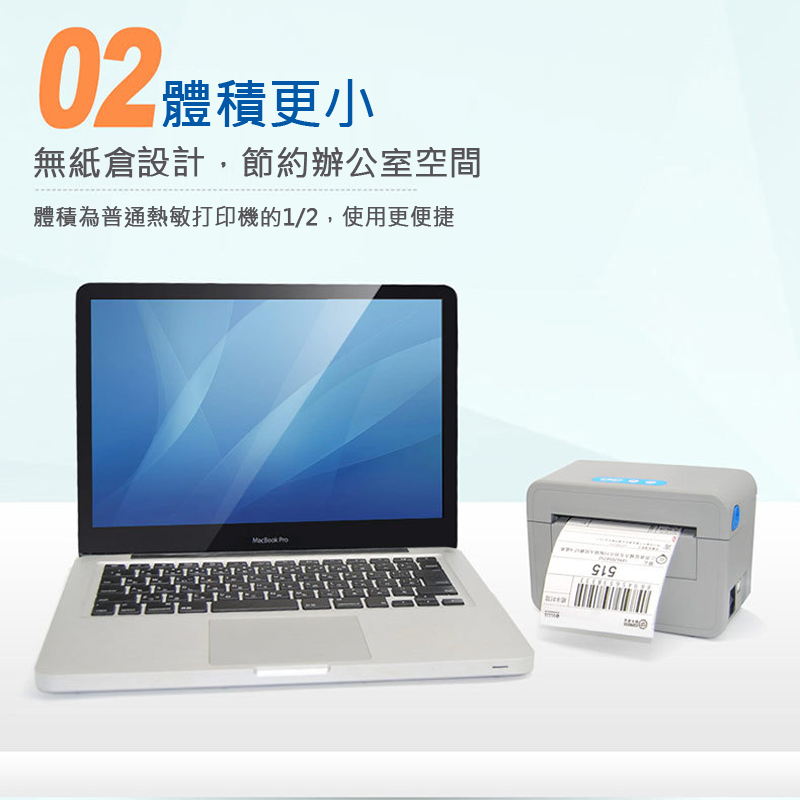
<style>
.page{position:relative;width:800px;height:800px}
.page>*{position:absolute;margin:0}
.t1{font:52.8px "MicrosoftJhengHeiRegular";color:#0257a7;font-weight:bold}
.t2{font:33.8px "MicrosoftJhengHeiRegular";color:#555356;font-weight:bold}
.t3{font:22.1px "MicrosoftJhengHeiRegular";color:#555356;font-weight:bold}
</style>
<div class="page">
<p class="t1" style="left:162px;top:79px;width:212px;height:48px">體積更小</p>
<p class="t2" style="left:34px;top:146px;width:446px;height:32px">無紙倉設計，節約辦公室空間</p>
<p class="t3" style="left:34px;top:206px;width:420px;height:22px">體積為普通熱敏打印機的1/2，使用更便捷</p>
</div>
